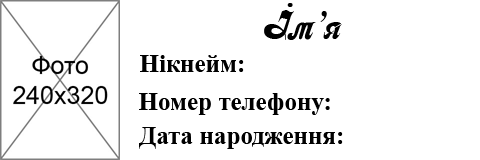
<style>
.page{position:relative;width:480px;height:160px;background:#ffffff}
.page>*{position:absolute;margin:0}
.t1{font:41.7px "Asessor";color:#000000}
.t2{font:25px "TimesNewRomanPS-BoldMT";color:#000000}
</style>
<div class="page">
<p class="t1" style="left:264px;top:3px;width:78px;height:37px">Ім’я</p>
<p class="t2" style="left:140px;top:55px;width:104px;height:17px">Нікнейм:</p>
<p class="t2" style="left:139px;top:93px;width:191px;height:22px">Номер телефону:</p>
<p class="t2" style="left:139px;top:127px;width:204px;height:22px">Дата народження:</p>
</div>
